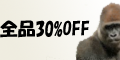
<style>
.page{position:relative;width:120px;height:60px}
.page>*{position:absolute;margin:0}
.t1{font:18px "HGSoeiKakupoptai";color:#000000}
</style>
<div class="page">
<p class="t1" style="left:0px;top:20px;width:90px;height:18px">全品30%OFF</p>
</div>
